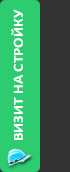
<style>
.page{position:relative;width:70px;height:172px;background:#2ecc71}
.page>*{position:absolute;margin:0}
.t1{font:14px "Calibri-Bold";color:#ffffff;scale:1.1 1}
</style>
<div class="page">
<p class="t1" style="left:11px;top:9px;width:12px;height:131px;rotate:-90deg">ВИЗИТ НА СТРОЙКУ</p>
</div>
